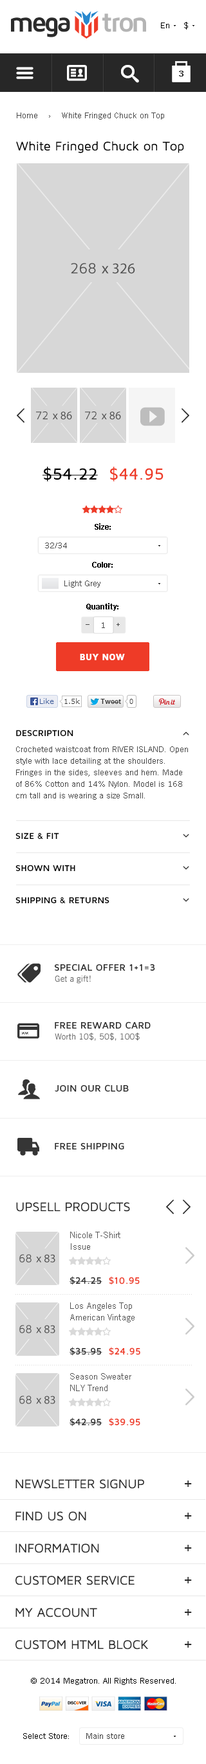
<style>
.page{position:relative;width:206px;height:1764px;background:#ffffff}
.page>*{position:absolute;margin:0}
.t1{font:28.1px "MavenProBold";letter-spacing:-0.1em;color:#2b2b2b}
.t2{font:28.1px "MavenProBold";letter-spacing:-0.1em;color:#b4b4b4}
.t3{font:8.4px "TradeGothicW01-Roman";color:#000000}
.t4{font:8.4px "TradeGothicW01-Bold2";color:#272727}
.t5{font:8.4px "TradeGothicW01-Roman";color:#494949}
.t6{font:12.9px "MavenProRegular";color:#000000}
.t7{font:16.7px "MavenProMedium";color:#000000}
.t8{font:16.7px "MavenProMedium";color:#ee3b27}
.t9{font:8.4px "TradeGothicW01-Bold2";color:#000000}
.t10{font:7.1px "TradeGothicW01-Bold2";color:#494949}
.t11{font:9px "MavenProBlack";color:#ffffff}
.t12{font:9px/32.1px "MavenProBold";color:#000000;text-transform:uppercase}
.t13{font:9px/38.6px "MavenProBold";color:#000000;text-transform:uppercase}
.t14{font:8.4px/11.6px "TradeGothicW01-Roman";color:#494949}
.t15{font:9.6px "MavenProBold";color:#2b2b2b;text-transform:uppercase}
.t16{font:8.4px "TradeGothicW01-Roman";color:#5b5b5b}
.t17{font:12.9px "MavenProRegular";color:#2b2b2b;text-transform:uppercase}
.t18{font:9px/11.3px "TradeGothicW01-Roman";color:#565656}
.t19{font:9.6px "MavenProBold";color:#353535}
.t20{font:9.6px "MavenProBold";color:#ee3b27}
.t21{font:12.9px/32.1px "MavenProRegular";color:#2b2b2b;text-transform:uppercase}
.t22{font:19.3px/32.1px "MavenProRegular";color:#2b2b2b;text-transform:uppercase}
.t23{font:8.4px "TradeGothicW01-Roman";color:#3c3c3c}
</style>
<div class="page">
<p class="t1" style="left:11px;top:14px;width:135px;height:23px">mega     <span class="t2">tron</span></p>
<p class="t3" style="left:161px;top:22px;width:8px;height:6px">En</p>
<p class="t3" style="left:184px;top:22px;width:4px;height:8px">$</p>
<p class="t4" style="left:179px;top:71px;width:4px;height:5px">3</p>
<p class="t5" style="left:17px;top:113px;width:147px;height:7px">Home    ›    White Fringed Chuck on Top</p>
<p class="t6" style="left:16px;top:141px;width:168px;height:12px">White Fringed Chuck on Top</p>
<p class="t7" style="left:42px;top:467px;width:121px;height:15px">$54.22  <span class="t8">$44.95</span></p>
<p class="t9" style="left:94px;top:523px;width:17px;height:7px">Size:</p>
<p class="t5" style="left:45px;top:543px;width:22px;height:5px">32/34</p>
<p class="t9" style="left:92px;top:562px;width:21px;height:6px">Color:</p>
<p class="t5" style="left:64px;top:580px;width:36px;height:8px">Light Grey</p>
<p class="t9" style="left:86px;top:603px;width:32px;height:8px">Quantity:</p>
<p class="t5" style="left:102px;top:622px;width:3px;height:6px">1</p>
<p class="t10" style="left:116px;top:623px;width:4px;height:3px">+</p>
<p class="t11" style="left:80px;top:654px;width:45px;height:6px">BUY NOW</p>
<p class="t12" style="left:15px;top:730px;width:94px;height:173px">Description<br><br><br><span class="t13">Size &amp; Fit<br></span>Shown With<br>Shipping &amp; Returns</p>
<p class="t14" style="left:16px;top:746px;width:172px;height:54px">Crocheted waistcoat from RIVER ISLAND. Open style with lace detailing at the shoulders. Fringes in the sides, sleeves and hem. Made of 86% Cotton and 14% Nylon. Model is 168 cm tall and is wearing a size Small.</p>
<p class="t15" style="left:55px;top:964px;width:100px;height:7px">Special Offer 1+1=3</p>
<p class="t16" style="left:55px;top:975px;width:36px;height:9px">Get a gift!</p>
<p class="t15" style="left:55px;top:1022px;width:95px;height:7px">FREE REWARD CARD</p>
<p class="t16" style="left:55px;top:1032px;width:85px;height:9px">Worth 10$, 50$, 100$</p>
<p class="t15" style="left:55px;top:1084px;width:74px;height:8px">Join Our Club</p>
<p class="t15" style="left:55px;top:1143px;width:69px;height:6px">Free Shipping</p>
<p class="t17" style="left:16px;top:1202px;width:114px;height:10px">UPSELL PRODUCTS</p>
<p class="t18" style="left:70px;top:1232px;width:50px;height:18px">Nicole T-Shirt<br>Issue</p>
<p class="t19" style="left:69px;top:1276px;width:71px;height:9px">$24.25  <span class="t20">$10.95</span></p>
<p class="t18" style="left:70px;top:1302px;width:64px;height:20px">Los Angeles Top<br>American Vintage</p>
<p class="t19" style="left:69px;top:1347px;width:71px;height:9px">$35.95  <span class="t20">$24.95</span></p>
<p class="t18" style="left:70px;top:1373px;width:61px;height:18px">Season Sweater<br>NLY Trend</p>
<p class="t19" style="left:69px;top:1418px;width:71px;height:8px">$42.95  <span class="t20">$39.95</span></p>
<p class="t21" style="left:15px;top:1479px;width:133px;height:171px">NEWSLETTER SIGNUP<br>FIND US ON<br>Information<br>customer service<br>My account<br>CUSTOM HTML BLOCK</p>
<p class="t22" style="left:184px;top:1480px;width:8px;height:168px">+<br>+<br>+<br>+<br>+<br>+</p>
<p class="t3" style="left:31px;top:1678px;width:145px;height:7px">© 2014 Megatron. All Rights Reserved.</p>
<p class="t3" style="left:23px;top:1733px;width:46px;height:6px">Select Store:</p>
<p class="t23" style="left:86px;top:1733px;width:38px;height:6px">Main store</p>
</div>
